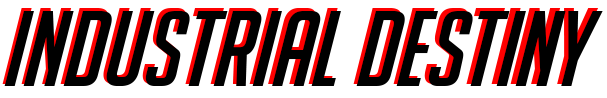
<style>
.page{position:relative;width:607px;height:98px;background:#ffffff}
.page>*{position:absolute;margin:0}
.t1{font:106px "BigNoodleTooOblique"}
.t2{font:103.5px "BigNoodleTooOblique";color:#000000}
</style>
<div class="page">
<p class="t1" style="left:2px;top:8px;width:597px;height:76px">INDUSTRIAL DESTINY</p>
<p class="t2" style="left:4px;top:11px;width:599px;height:75px">INDUSTRIAL DESTINY</p>
</div>
